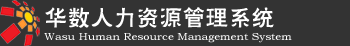
<style>
.page{position:relative;width:350px;height:46px;background:#333333}
.page>*{position:absolute;margin:0}
.t1{font:25.6px "FZHLJW--GB1-0";color:#ffffff;scale:0.9 1}
.t2{font:10.2px "BookmanOldStyle";color:#ffffff;scale:1.1 1}
</style>
<div class="page">
<p class="t1" style="left:45px;top:7px;width:229px;height:21px">华数人力资源管理系统</p>
<p class="t2" style="left:44px;top:33px;width:248px;height:10px">Wasu Human Resource Management System</p>
</div>
